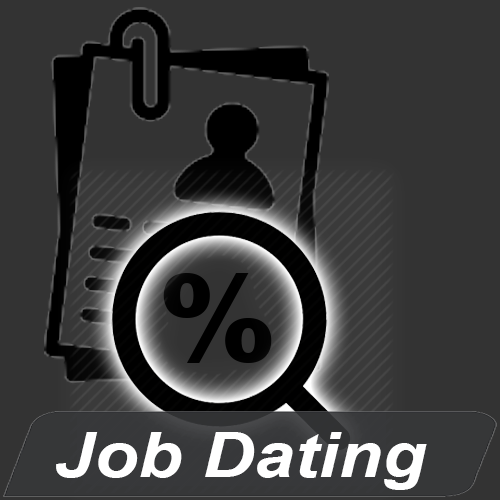
<style>
.page{position:relative;width:500px;height:500px;background:#333333}
.page>*{position:absolute;margin:0}
.t1{font:118.9px "Arial-Black";color:#000000}
.t2{font:62.3px "Arial-BoldItalicMT";color:#ffffff;scale:1.16 1}
</style>
<div class="page">
<p class="t1" style="left:163px;top:273px;width:109px;height:90px">%</p>
<p class="t2" style="left:56px;top:432px;width:371px;height:58px">Job Dating</p>
</div>
